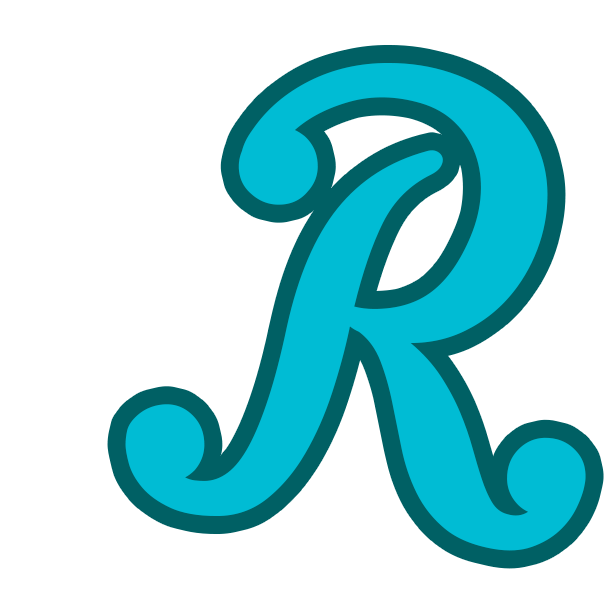
<style>
.page{position:relative;width:612px;height:612px;background:#ffffff}
.page>*{position:absolute;margin:0}
.t1{font:600px "IntriqueScriptPersonalUse";color:#00bcd4}
</style>
<div class="page">
<p class="t1" style="left:125px;top:63px;width:461px;height:488px">R</p>
</div>
